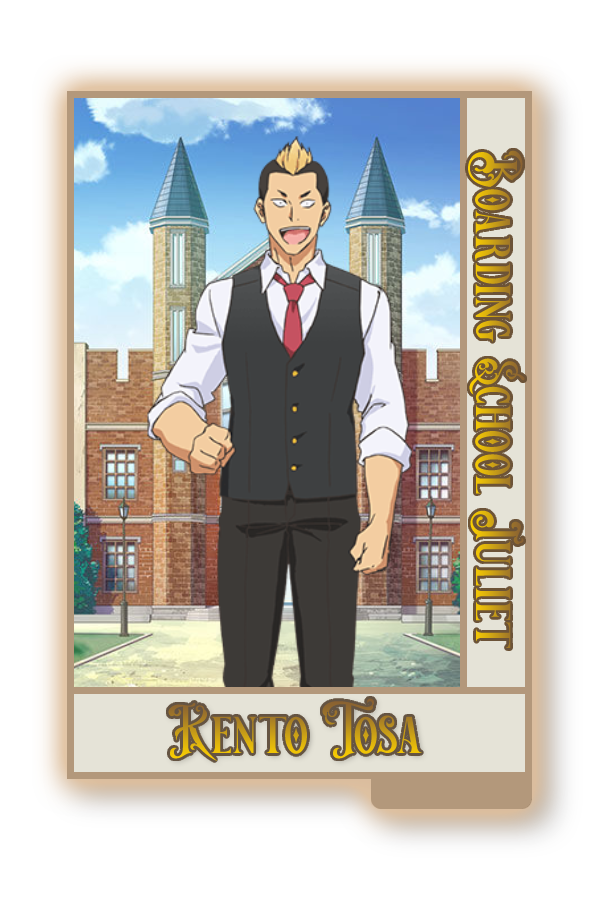
<style>
.page{position:relative;width:600px;height:900px;background:#ffffff}
.page>*{position:absolute;margin:0}
.t1{font:58.9px "VictorianDecadeDemoVersion"}
.t2{font:62.3px "VictorianDecadeDemoVersion"}
</style>
<div class="page">
<p class="t1" style="left:468px;top:150px;width:57px;height:498px;rotate:90deg">Boarding School Juliet</p>
<p class="t2" style="left:168px;top:698px;width:254px;height:64px">Kento Tosa</p>
</div>
